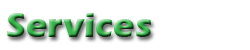
<style>
.page{position:relative;width:250px;height:50px;background:#ffffff}
.page>*{position:absolute;margin:0}
.t1{font:36px "ErasITC-Bold"}
</style>
<div class="page">
<p class="t1" style="left:7px;top:13px;width:144px;height:24px">Services</p>
</div>
